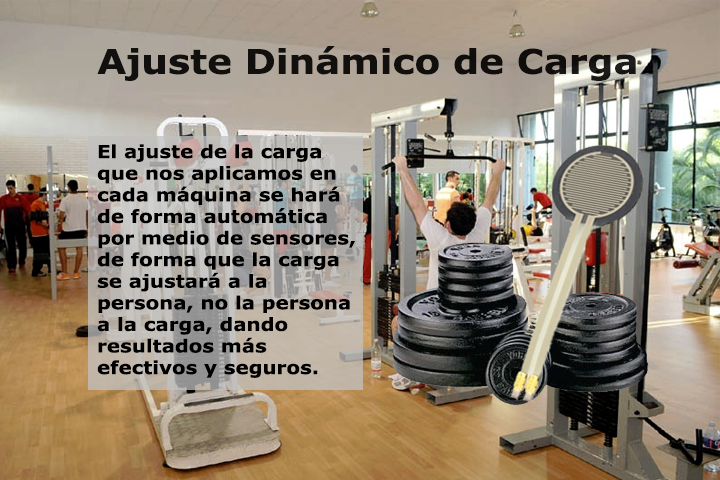
<style>
.page{position:relative;width:720px;height:480px}
.page>*{position:absolute;margin:0}
.t1{font:34px "Verdana-Bold";color:#000000;scale:1.1 1}
.t2{font:18px "Verdana-Bold";color:#000000;scale:1.1 1}
</style>
<div class="page">
<p class="t1" style="left:97px;top:46px;width:539px;height:35px;opacity:0.95">Ajuste Dinámico de Carga</p>
<p class="t2" style="left:97px;top:144px;width:258px;height:234px">El ajuste de la carga que nos aplicamos en cada máquina se hará de forma automática por medio de sensores, de forma que la carga se ajustará a la persona, no la persona a la carga, dando resultados más efectivos y seguros.</p>
</div>
